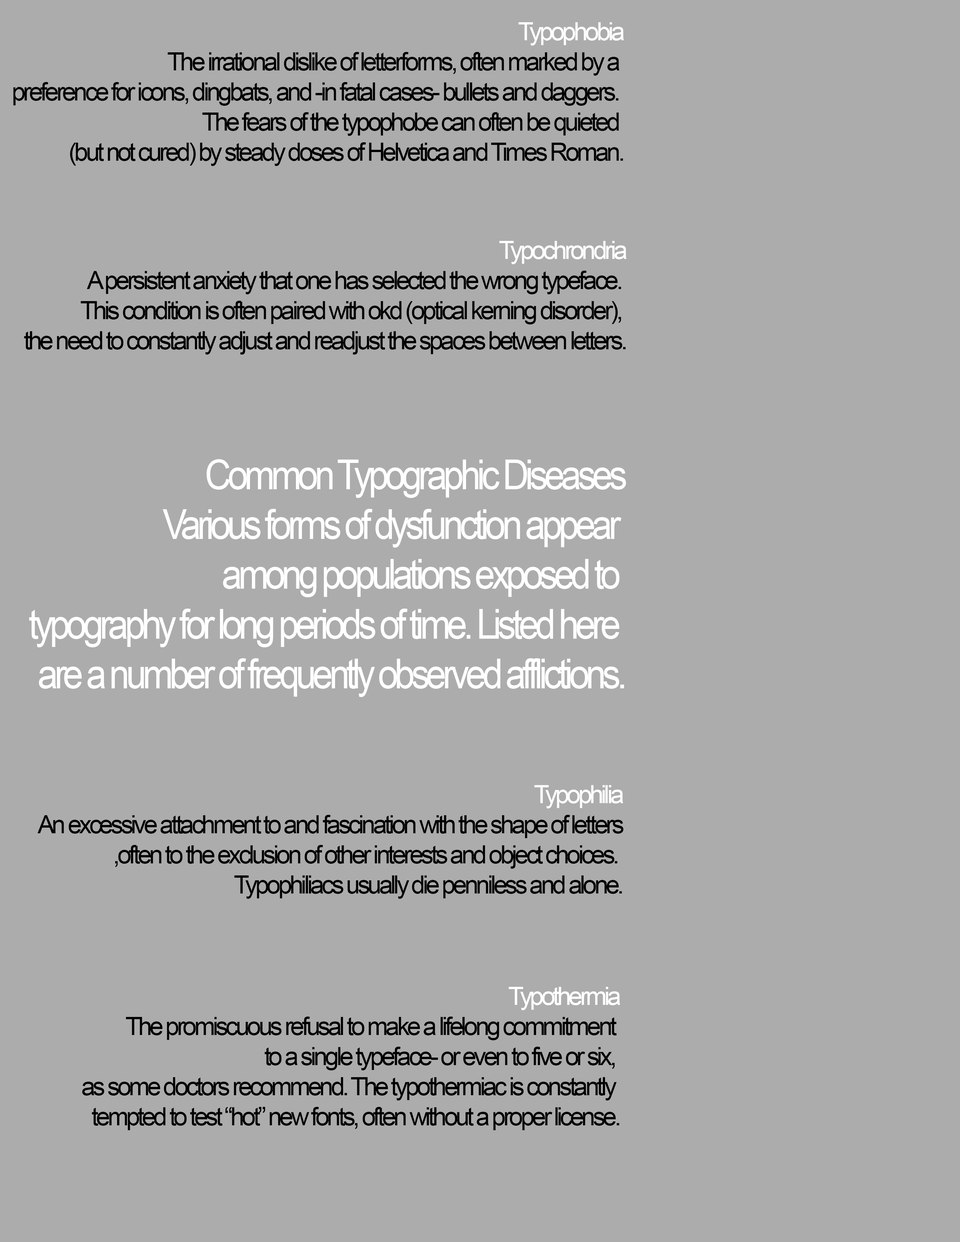
<style>
.page{position:relative;width:960px;height:1242px;background:#acacac}
.page>*{position:absolute;margin:0}
.t1{font:25.1px "ArialMT";letter-spacing:-0.1em;color:#000000}
.t2{font:25.1px "ArialMT";letter-spacing:-0.1em;color:#ffffff}
.t3{font:41.5px "ArialMT";letter-spacing:-0.1em;color:#ffffff;scale:0.88 1}
</style>
<div class="page">
<p class="t1" style="left:13px;top:22px;width:611px;height:144px;text-align:right"><span class="t2">Typophobia<br></span>The irrational dislike of letterforms, often marked by a <br>preference for icons, dingbats, and -in fatal cases- bullets and daggers. <br>The fears of the typophobe can often be quieted <br>(but not cured) by steady doses of Helvetica and Times Roman.</p>
<p class="t1" style="left:24px;top:241px;width:603px;height:114px;text-align:right"><span class="t2">Typochrondria<br></span>A persistent anxiety that one has selected the wrong typeface. <br>This condition is often paired with okd (optical kerning disorder), <br>the need to constantly adjust and readjust the spaces between letters.</p>
<p class="t3" style="left:29px;top:459px;width:597px;height:238px;text-align:right">Common Typographic Diseases<br>Various forms of dysfunction appear <br>among populations exposed to <br>typography for long periods of time. Listed here <br>are a number of frequently observed afflictions.</p>
<p class="t1" style="left:37px;top:785px;width:586px;height:114px;text-align:right"><span class="t2">Typophilia<br></span>An excessive attachment to and fascination with the shape of letters<br>,often to the exclusion of other interests and object choices. <br>Typophiliacs usually die penniless and alone.</p>
<p class="t1" style="left:82px;top:987px;width:538px;height:143px;text-align:right"><span class="t2">Typothermia<br></span>The promiscuous refusal to make a lifelong commitment <br>to a single typeface- or even to five or six, <br>as some doctors recommend. The typothermiac is constantly <br>tempted to test “hot” new fonts, often without a proper license.</p>
</div>
